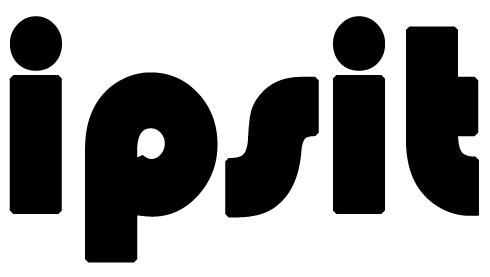
<style>
.page{position:relative;width:490px;height:277px;background:#ffffff}
.page>*{position:absolute;margin:0}
.t1{font:270.4px "Bauhaus93";color:#000000;font-weight:bold;scale:0.91 1}
</style>
<div class="page">
<p class="t1" style="left:9px;top:16px;width:470px;height:247px">ipsit</p>
</div>
